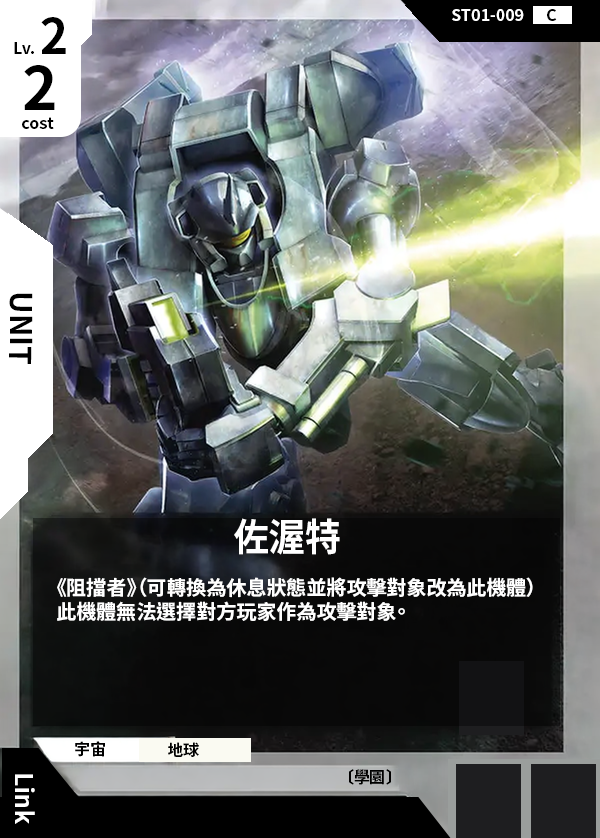
<style>
.page{position:relative;width:600px;height:838px}
.page>*{position:absolute;margin:0}
.t1{font:48px "NotoSansCJKtc-Bold";color:#000000}
.t2{font:16px "NotoSansCJKtc-Bold";color:#ffffff}
.t3{font:16px "NotoSansCJKtc-Bold";color:#000000}
.t4{font:60px "NotoSansCJKtc-Bold";color:#000000}
.t5{font:30px "NotoSansCJKtc-Bold";color:#000000}
.t6{font:38.4px "NotoSansCJKtc-Bold";color:#ffffff;scale:0.94 1}
.t7{font:20px "NotoSansCJKtc-Bold";color:#ffffff}
.t8{font:24px "NotoSansCJKtc-Bold";color:#ffffff}
</style>
<div class="page">
<p class="t1" style="left:41px;top:17px;width:25px;height:37px">2</p>
<p class="t2" style="left:452px;top:9px;width:72px;height:12px">ST01-009</p>
<p class="t3" style="left:547px;top:9px;width:10px;height:12px">C</p>
<p class="t3" style="left:14px;top:42px;width:20px;height:12px">Lv.</p>
<p class="t4" style="left:24px;top:65px;width:31px;height:45px">2</p>
<p class="t3" style="left:22px;top:117px;width:32px;height:12px">cost</p>
<p class="t5" style="left:9px;top:293px;width:24px;height:71px;rotate:90deg">UNIT</p>
<p class="t6" style="left:234px;top:518px;width:106px;height:37px">佐渥特</p>
<p class="t7" style="left:57px;top:577px;width:476px;height:45px">《阻擋者》（可轉換為休息狀態並將攻擊對象改為此機體）<br>此機體無法選擇對方玩家作為攻擊對象。</p>
<p class="t3" style="left:75px;top:741px;width:30px;height:16px">宇宙</p>
<p class="t3" style="left:168px;top:742px;width:31px;height:15px">地球</p>
<p class="t8" style="left:15px;top:774px;width:20px;height:50px;rotate:90deg">Link</p>
<p class="t3" style="left:349px;top:769px;width:42px;height:16px">〔學園〕</p>
</div>
